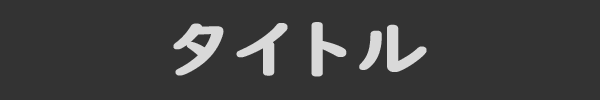
<style>
.page{position:relative;width:600px;height:100px;background:#333333}
.page>*{position:absolute;margin:0}
.t1{font:63.8px "UDDigiKyokashoNK-B";letter-spacing:0.05em;color:#d9d9d9;font-weight:bold;scale:1.18 1}
</style>
<div class="page">
<p class="t1" style="left:173px;top:22px;width:254px;height:55px">タイトル</p>
</div>
